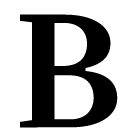
<style>
.page{position:relative;width:140px;height:140px;background:#ffffff}
.page>*{position:absolute;margin:0}
.t1{font:157.5px "Serif12Beta-Bold";color:#000000}
</style>
<div class="page">
<p class="t1" style="left:20px;top:14px;width:98px;height:114px">B</p>
</div>
